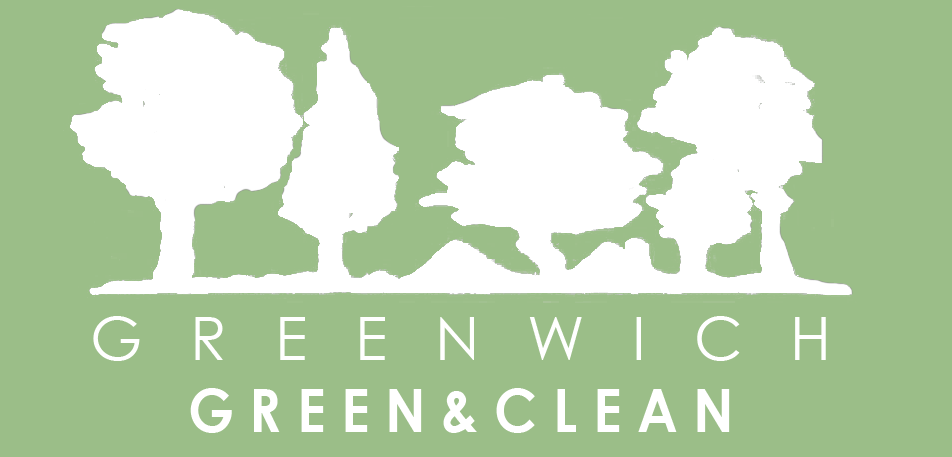
<style>
.page{position:relative;width:952px;height:457px;background:#9bbe88}
.page>*{position:absolute;margin:0}
.t1{font:60px "CenturyGothic-Bold";color:#ffffff;scale:0.92 1}
.t2{font:60px "CenturyGothic";letter-spacing:0.26em;color:#ffffff}
</style>
<div class="page">
<p class="t1" style="left:93px;top:316px;width:733px;height:117px;text-align:center"><span class="t2">G R E E N W I C H<br></span>G R E E N &amp; C L E A N</p>
</div>
